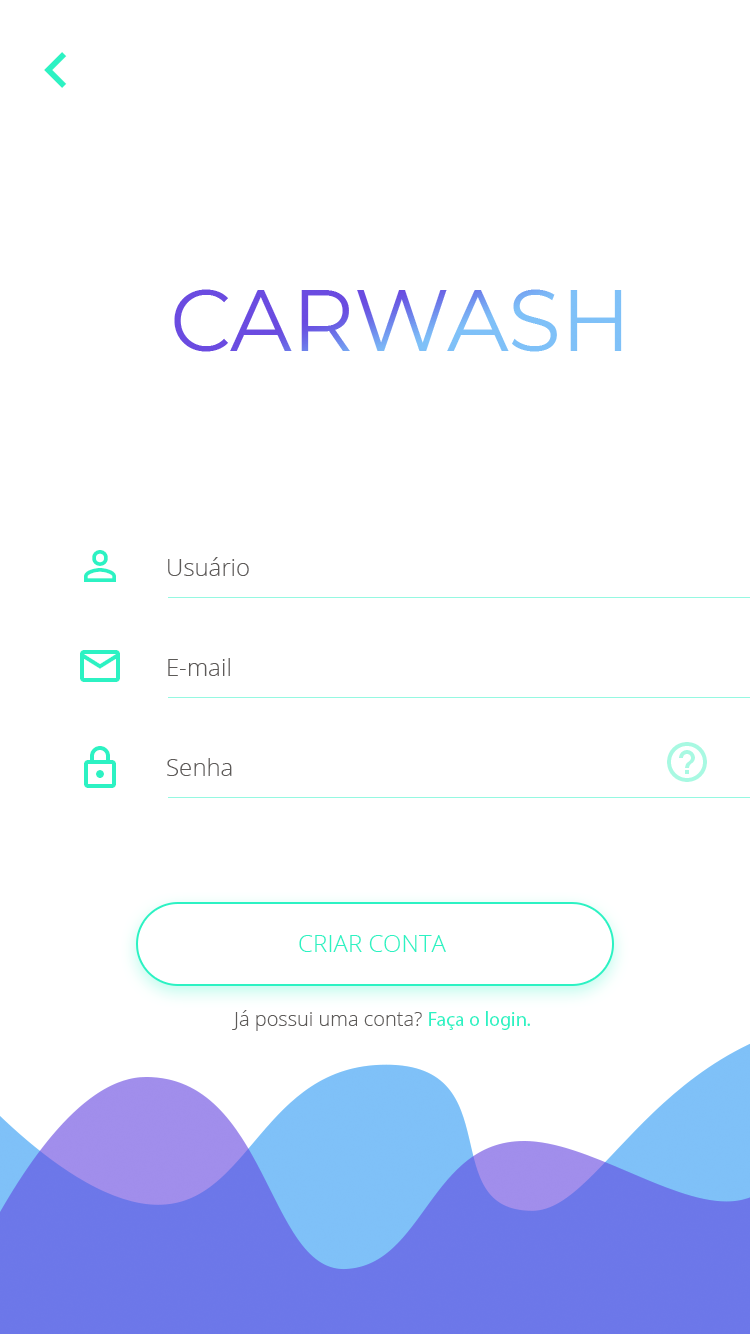
<style>
.page{position:relative;width:750px;height:1334px;background:#ffffff}
.page>*{position:absolute;margin:0}
.t1{font:24px "OpenSans-Light";color:#5d5a58}
.t2{font:24px "OpenSans-Light";color:#2cf2c3}
.t3{font:20px "OpenSans-Light";color:#5d5a58}
.t4{font:20px "MyriadPro-Regular";color:#2cf2c3}
</style>
<div class="page">
<p class="t1" style="left:168px;top:557px;width:81px;height:19px">Usuário</p>
<p class="t1" style="left:168px;top:658px;width:62px;height:18px">E-mail</p>
<p class="t1" style="left:167px;top:758px;width:65px;height:18px">Senha</p>
<p class="t2" style="left:299px;top:935px;width:147px;height:17px">CRIAR CONTA</p>
<p class="t3" style="left:232px;top:1010px;width:298px;height:21px">Já possui uma conta? <span class="t4">Faça o login.</span></p>
</div>
